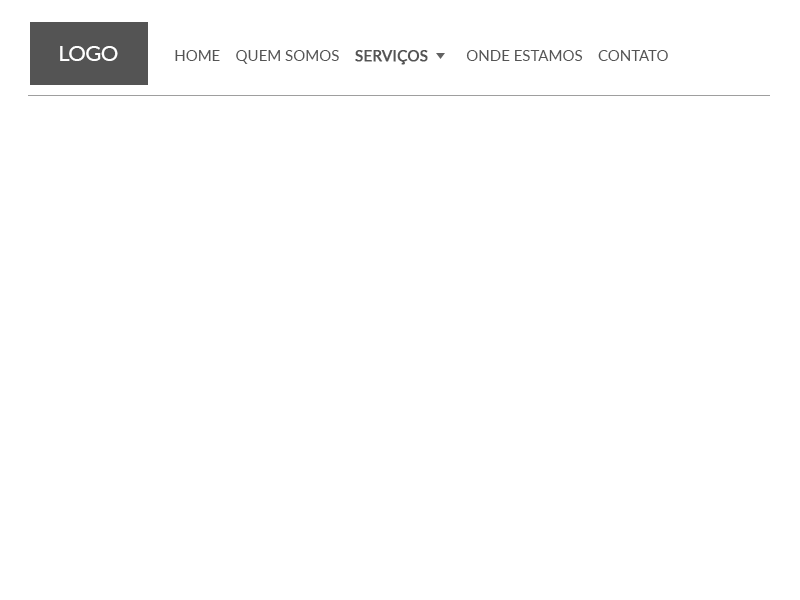
<style>
.page{position:relative;width:800px;height:600px;background:#ffffff}
.page>*{position:absolute;margin:0}
.t1{font:21.9px "Lato-Regular";letter-spacing:-0.025em;color:#ffffff;text-transform:uppercase}
.t2{font:15px "Lato-Regular";color:#545454;text-transform:uppercase}
.t3{font:15px "Lato-Regular";color:#545454;text-transform:uppercase;font-weight:bold}
</style>
<div class="page">
<p class="t1" style="left:60px;top:46px;width:58px;height:15px">logo</p>
<p class="t2" style="left:175px;top:50px;width:493px;height:15px">Home    quem somos    <span class="t3">serviços         </span>onde estamos    contato</p>
</div>
